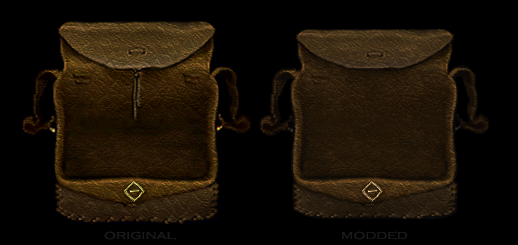
<style>
.page{position:relative;width:518px;height:245px;background:#000000}
.page>*{position:absolute;margin:0}
.t1{font:12.8px "CopperplateGothic-Light";color:#1a1a1a;scale:1.25 1}
</style>
<div class="page">
<p class="t1" style="left:104px;top:231px;width:72px;height:9px">original</p>
<p class="t1" style="left:341px;top:231px;width:67px;height:9px">modded</p>
</div>
